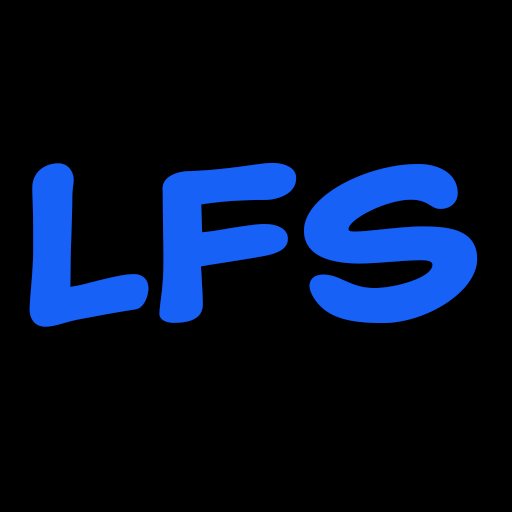
<style>
.page{position:relative;width:512px;height:512px;background:#000000}
.page>*{position:absolute;margin:0}
.t1{font:223.9px "ClassicComic-Bold";color:#1761f7}
</style>
<div class="page">
<p class="t1" style="left:29px;top:162px;width:449px;height:165px">LFS</p>
</div>
